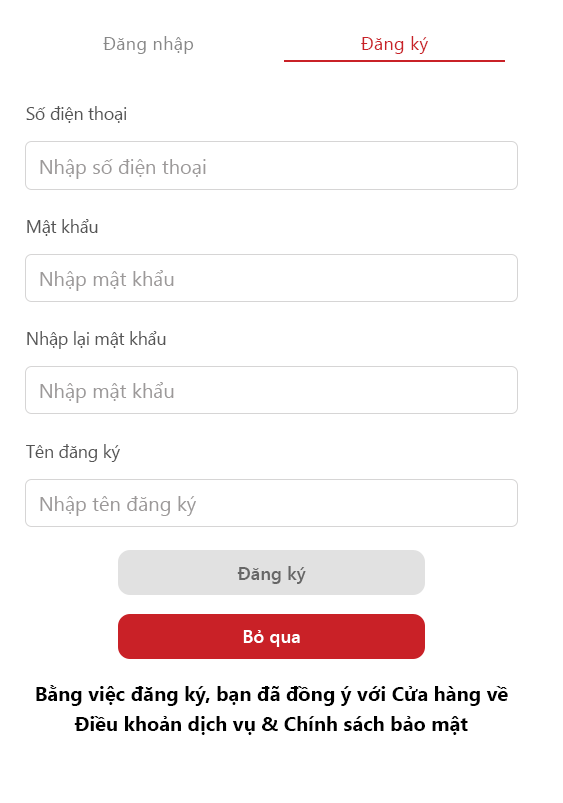
<style>
.page{position:relative;width:563px;height:803px;background:#ffffff}
.page>*{position:absolute;margin:0}
.t1{font:18.3px "SegoeUI";letter-spacing:0.01em;color:#888888}
.t2{font:18.3px "SegoeUI";letter-spacing:0.01em;color:#c92127}
.t3{font:18.3px "SegoeUI";letter-spacing:-0.023em;color:#555555}
.t4{font:20px "SegoeUI";color:#9c9999}
.t5{font:18.3px "SegoeUI-Semibold";color:#666666}
.t6{font:18.3px "SegoeUI-Semibold";color:#ffffff}
.t7{font:20px/30px "SegoeUI-Bold";color:#000000}
</style>
<div class="page">
<p class="t1" style="left:103px;top:36px;width:91px;height:18px">Đăng nhập</p>
<p class="t2" style="left:361px;top:36px;width:67px;height:18px">Đăng ký</p>
<p class="t3" style="left:26px;top:106px;width:101px;height:17px">Số điện thoại</p>
<p class="t4" style="left:40px;top:159px;width:166px;height:20px">Nhập số điện thoại</p>
<p class="t3" style="left:27px;top:219px;width:71px;height:17px">Mật khẩu</p>
<p class="t4" style="left:40px;top:270px;width:134px;height:21px">Nhập mật khẩu</p>
<p class="t3" style="left:27px;top:331px;width:139px;height:18px">Nhập lại mật khẩu</p>
<p class="t4" style="left:40px;top:382px;width:134px;height:21px">Nhập mật khẩu</p>
<p class="t3" style="left:26px;top:444px;width:94px;height:18px">Tên đăng ký</p>
<p class="t4" style="left:40px;top:496px;width:156px;height:20px">Nhập tên đăng ký</p>
<p class="t5" style="left:237px;top:566px;width:69px;height:18px">Đăng ký</p>
<p class="t6" style="left:243px;top:630px;width:57px;height:17px">Bỏ qua</p>
<p class="t7" style="left:36px;top:685px;width:472px;height:50px;text-align:center">Bằng việc đăng ký, bạn đã đồng ý với Cửa hàng về<br>Điều khoản dịch vụ &amp; Chính sách bảo mật</p>
</div>
